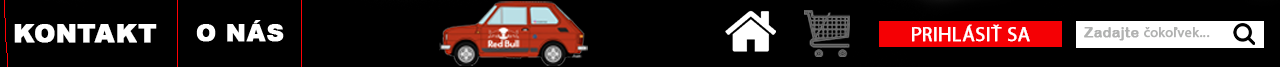
<style>
.page{position:relative;width:1280px;height:67px;background:#000000}
.page>*{position:absolute;margin:0}
.t1{font:25px "Arial-Black";letter-spacing:0.025em;color:#ffffff;font-weight:bold}
.t2{font:20.1px "MyriadPro-Regular";letter-spacing:0.025em;color:#ffffff;font-weight:bold}
.t3{font:14px "MyriadPro-Regular";letter-spacing:0.025em;color:#b1b2b1;font-weight:bold}
.t4{font:14px "ArialRoundedMTBold";letter-spacing:0.025em;color:#b1b2b1;font-weight:bold}
</style>
<div class="page">
<p class="t1" style="left:14px;top:24px;width:143px;height:19px">KONTAKT</p>
<p class="t2" style="left:912px;top:24px;width:118px;height:18px">PRIHLÁSIŤ SA</p>
<p class="t3" style="left:1084px;top:27px;width:126px;height:14px"><span class="t4">Zadajte </span>čokoľvek...</p>
</div>
